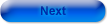
<style>
.page{position:relative;width:107px;height:24px}
.page>*{position:absolute;margin:0}
.t1{font:12px "Arial-BoldMT";color:#0028a7}
</style>
<div class="page">
<p class="t1" style="left:41px;top:6px;width:25px;height:9px">Next</p>
</div>
